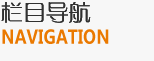
<style>
.page{position:relative;width:154px;height:61px;background:#f7f7f7}
.page>*{position:absolute;margin:0}
.t1{font:22px "FZXQJW--GB1-0";color:#303030;font-weight:bold}
.t2{font:18.7px "MicrosoftYaHei";color:#ea7900;scale:0.86 1}
</style>
<div class="page">
<p class="t1" style="left:1px;top:2px;width:90px;height:21px">栏目导航</p>
<p class="t1" style="left:1px;top:2px;width:90px;height:21px">栏目导航</p>
<p class="t2" style="left:2px;top:29px;width:107px;height:15px">NAVIGATION</p>
</div>
